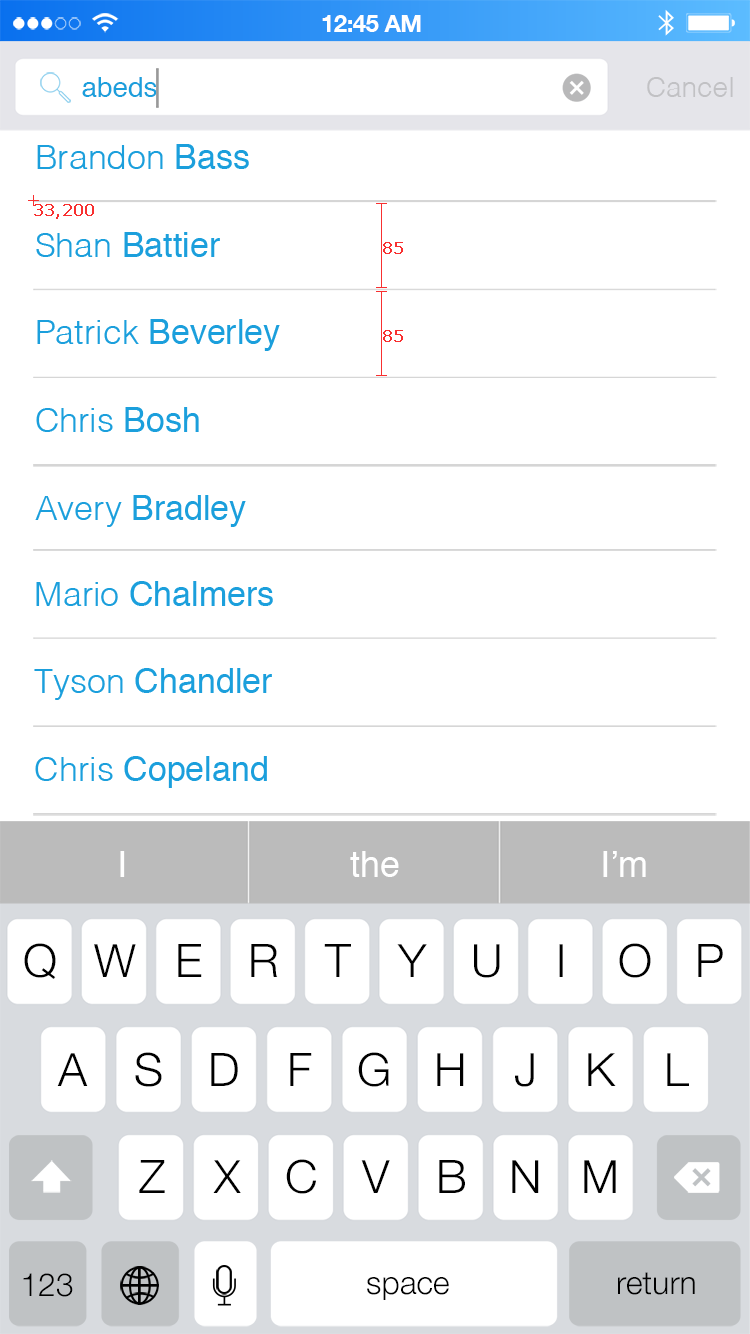
<style>
.page{position:relative;width:750px;height:1334px;background:#ffffff}
.page>*{position:absolute;margin:0}
.t1{font:23.8px "HelveticaNeue-Bold";letter-spacing:-0.02em;color:#ffffff}
.t2{font:28px "Helvetica";color:#1b9fdc}
.t3{font:28px "Helvetica-Light";color:#c1c1c4}
.t4{font:34px "Helvetica-Light";color:#1b9fdc}
.t5{font:34px "Helvetica";color:#1b9fdc}
.t6{font:16px "Verdana";color:#f83030;font-weight:bold}
.t7{font:36px "Helvetica";color:#ffffff}
.t8{font:46px "HelveticaNeue-Light";color:#000000}
.t9{font:32px "HelveticaNeue-Light";color:#000000}
</style>
<div class="page">
<p class="t1" style="left:322px;top:15px;width:99px;height:17px">12:45 AM</p>
<p class="t2" style="left:82px;top:77px;width:75px;height:20px">abeds</p>
<p class="t3" style="left:647px;top:77px;width:86px;height:20px">Cancel</p>
<p class="t4" style="left:37px;top:144px;width:212px;height:25px">Brandon<span class="t5"> Bass</span></p>
<p class="t6" style="left:34px;top:204px;width:60px;height:15px">33,200</p>
<p class="t5" style="left:36px;top:232px;width:184px;height:25px"><span class="t4">Shan</span> Battier</p>
<p class="t6" style="left:383px;top:242px;width:20px;height:12px">85</p>
<p class="t5" style="left:37px;top:319px;width:243px;height:32px"><span class="t4">Patrick</span> Beverley</p>
<p class="t6" style="left:383px;top:330px;width:20px;height:12px">85</p>
<p class="t4" style="left:36px;top:407px;width:163px;height:25px">Chris<span class="t5"> Bosh</span></p>
<p class="t5" style="left:35px;top:495px;width:211px;height:32px"><span class="t4">Avery</span> Bradley</p>
<p class="t5" style="left:36px;top:581px;width:237px;height:25px"><span class="t4">Mario</span> Chalmers</p>
<p class="t5" style="left:34px;top:668px;width:238px;height:32px"><span class="t4">Tyson</span> Chandler</p>
<p class="t5" style="left:35px;top:756px;width:232px;height:32px"><span class="t4">Chris</span> Copeland</p>
<p class="t7" style="left:120px;top:851px;width:5px;height:26px">I</p>
<p class="t7" style="left:350px;top:851px;width:49px;height:26px">the</p>
<p class="t7" style="left:603px;top:851px;width:43px;height:26px">I’m</p>
<p class="t8" style="left:24px;top:943px;width:32px;height:36px">Q</p>
<p class="t8" style="left:94px;top:944px;width:42px;height:33px">W</p>
<p class="t8" style="left:178px;top:944px;width:24px;height:33px">E</p>
<p class="t8" style="left:251px;top:944px;width:27px;height:33px">R</p>
<p class="t8" style="left:324px;top:944px;width:27px;height:33px">T</p>
<p class="t8" style="left:397px;top:944px;width:30px;height:33px">Y</p>
<p class="t8" style="left:474px;top:944px;width:26px;height:34px">U</p>
<p class="t8" style="left:559px;top:944px;width:4px;height:33px">I</p>
<p class="t8" style="left:619px;top:943px;width:32px;height:35px">O</p>
<p class="t8" style="left:698px;top:944px;width:25px;height:33px">P</p>
<p class="t8" style="left:57px;top:1053px;width:31px;height:33px">A</p>
<p class="t8" style="left:135px;top:1052px;width:27px;height:35px">S</p>
<p class="t8" style="left:211px;top:1053px;width:27px;height:33px">D</p>
<p class="t8" style="left:290px;top:1053px;width:22px;height:33px">F</p>
<p class="t8" style="left:358px;top:1052px;width:31px;height:35px">G</p>
<p class="t8" style="left:437px;top:1053px;width:27px;height:33px">H</p>
<p class="t8" style="left:515px;top:1053px;width:19px;height:34px">J</p>
<p class="t8" style="left:588px;top:1053px;width:28px;height:33px">K</p>
<p class="t8" style="left:667px;top:1053px;width:22px;height:33px">L</p>
<p class="t8" style="left:139px;top:1160px;width:26px;height:33px">Z</p>
<p class="t8" style="left:213px;top:1160px;width:28px;height:33px">X</p>
<p class="t8" style="left:286px;top:1159px;width:30px;height:35px">C</p>
<p class="t8" style="left:361px;top:1160px;width:29px;height:33px">V</p>
<p class="t8" style="left:439px;top:1160px;width:26px;height:33px">B</p>
<p class="t8" style="left:512px;top:1160px;width:27px;height:33px">N</p>
<p class="t8" style="left:584px;top:1160px;width:32px;height:33px">M</p>
<p class="t9" style="left:23px;top:1273px;width:50px;height:24px">123</p>
<p class="t9" style="left:367px;top:1277px;width:82px;height:23px">space</p>
<p class="t9" style="left:618px;top:1272px;width:77px;height:23px">return</p>
</div>
